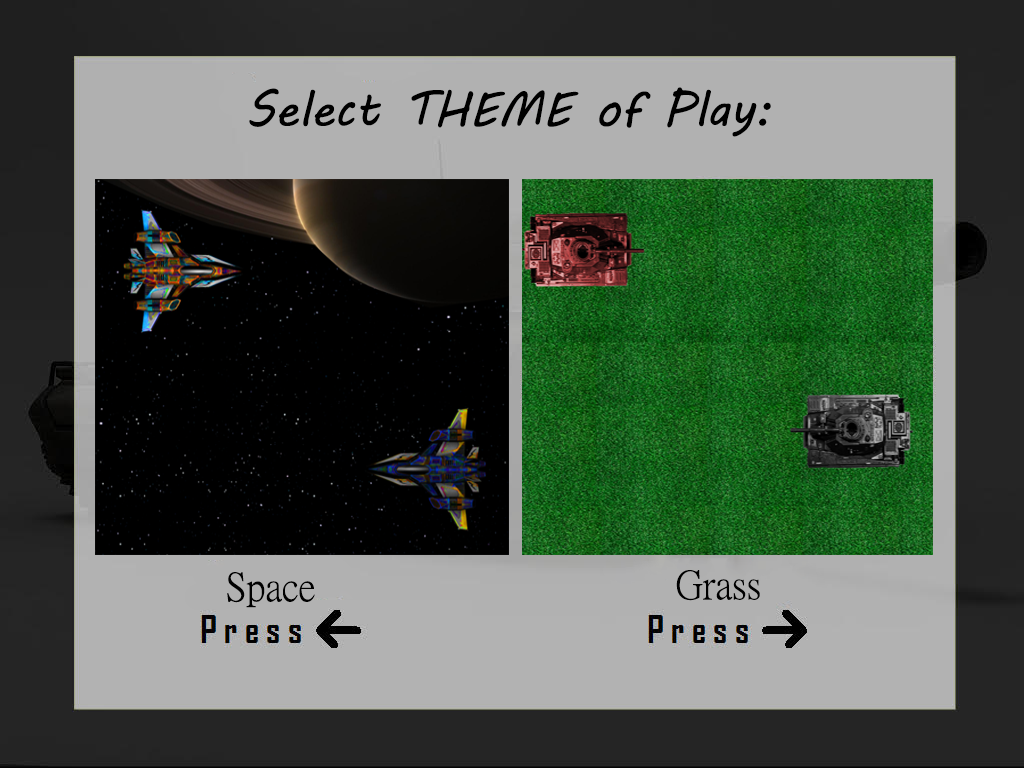
<style>
.page{position:relative;width:1024px;height:768px}
.page>*{position:absolute;margin:0}
.t1{font:48px "MVBoli";color:#000000}
.t2{font:40px "PMingLiU-ExtB";color:#000000}
</style>
<div class="page">
<p class="t1" style="left:249px;top:87px;width:522px;height:50px">Select THEME of Play:</p>
<p class="t2" style="left:227px;top:572px;width:88px;height:36px">Space</p>
<p class="t2" style="left:676px;top:570px;width:84px;height:31px">Grass</p>
</div>
